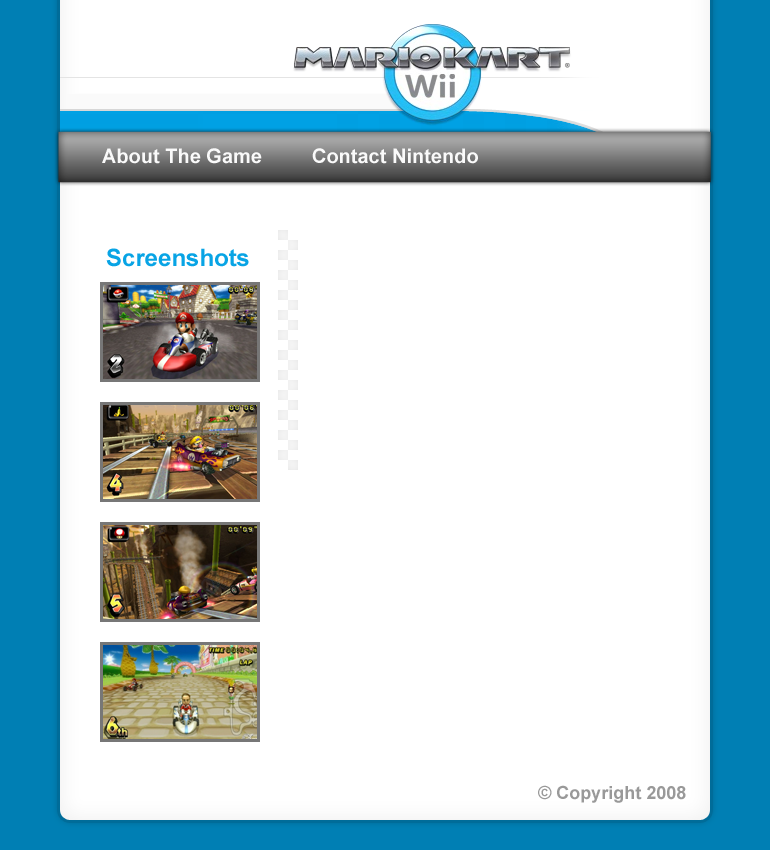
<style>
.page{position:relative;width:770px;height:850px;background:#ffffff}
.page>*{position:absolute;margin:0}
.t1{font:20px "Arial-BoldMT";color:#fafafa}
.t2{font:24px "Arial-BoldMT";color:#08a4e5}
.t3{font:18px "Arial-BoldMT";color:#999999}
</style>
<div class="page">
<p class="t1" style="left:102px;top:148px;width:376px;height:16px">About The Game         Contact Nintendo</p>
<p class="t2" style="left:106px;top:248px;width:143px;height:19px">Screenshots</p>
<p class="t3" style="left:538px;top:785px;width:148px;height:18px">© Copyright 2008</p>
</div>
